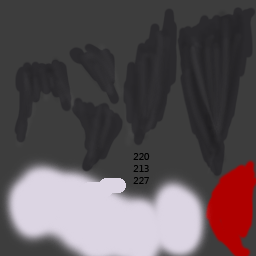
<style>
.page{position:relative;width:256px;height:256px;background:#3d3d3d}
.page>*{position:absolute;margin:0}
.t1{font:10px "LaoUI";color:#000000}
</style>
<div class="page">
<p class="t1" style="left:133px;top:153px;width:17px;height:31px">220<br>213<br>227</p>
</div>
